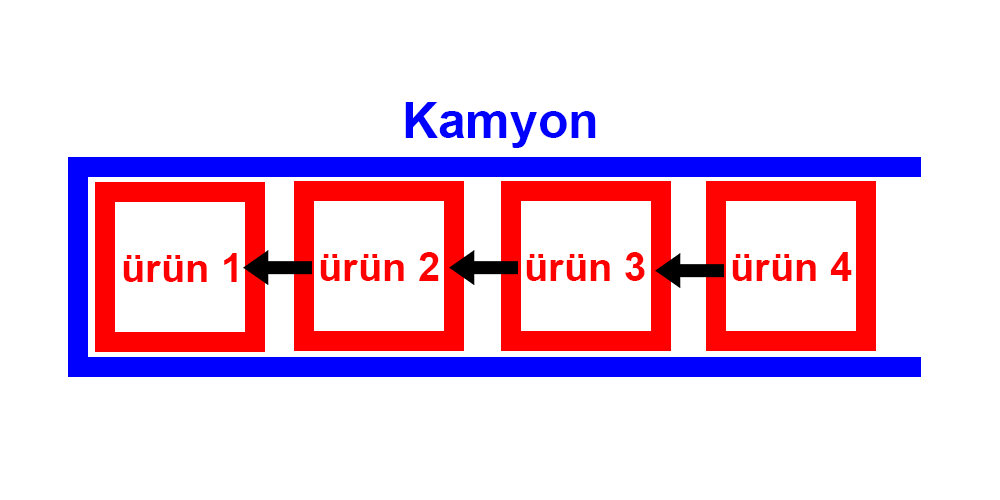
<style>
.page{position:relative;width:1000px;height:500px;background:#ffffff}
.page>*{position:absolute;margin:0}
.t1{font:50px "Arial-BoldMT";color:#0000ff}
.t2{font:40px "Arial-BoldMT";color:#ff0000}
</style>
<div class="page">
<p class="t1" style="left:405px;top:102px;width:191px;height:46px">Kamyon</p>
<p class="t2" style="left:123px;top:253px;width:114px;height:29px">ürün 1</p>
<p class="t2" style="left:320px;top:252px;width:119px;height:29px">ürün 2</p>
<p class="t2" style="left:526px;top:252px;width:119px;height:29px">ürün 3</p>
<p class="t2" style="left:732px;top:252px;width:120px;height:29px">ürün 4</p>
</div>
